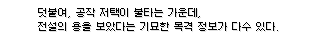
<style>
.page{position:relative;width:320px;height:45px;background:#ffffff}
.page>*{position:absolute;margin:0}
.t1{font:10px/14px "Galmuri9-Regular";color:#000000}
</style>
<div class="page">
<p class="t1" style="left:38px;top:8px;width:240px;height:23px">덧붙여, 공작 저택이 불타는 가운데, <br>전설의 용을 보았다는 기묘한 목격 정보가 다수 있다.</p>
</div>
